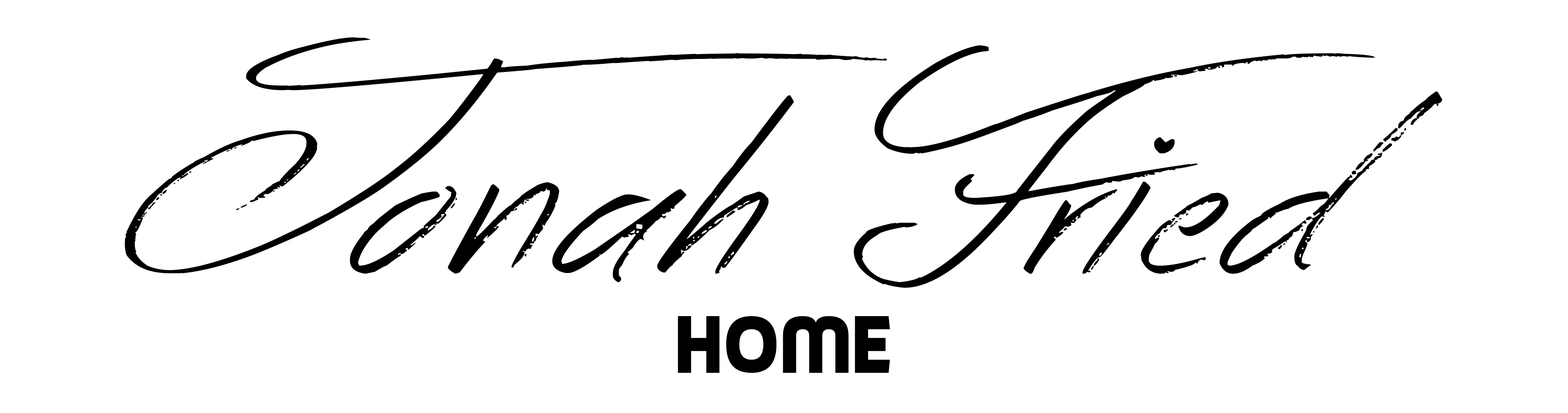
<style>
.page{position:relative;width:1568px;height:413px;background:#ffffff}
.page>*{position:absolute;margin:0}
.t1{font:316.6px "AcrosstheRoad";letter-spacing:0.025em;color:#000000}
.t2{font:89.4px "PiximisaRegular";letter-spacing:0.025em;color:#000000}
</style>
<div class="page">
<p class="t1" style="left:125px;top:37px;width:1317px;height:251px">Jonah Fried</p>
<p class="t2" style="left:678px;top:316px;width:212px;height:57px">home</p>
</div>
